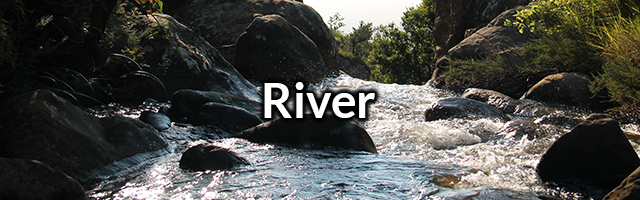
<style>
.page{position:relative;width:640px;height:200px}
.page>*{position:absolute;margin:0}
.t1{font:48px "Lato-Bold";color:#ffffff}
</style>
<div class="page">
<p class="t1" style="left:264px;top:82px;width:111px;height:36px">River</p>
</div>
